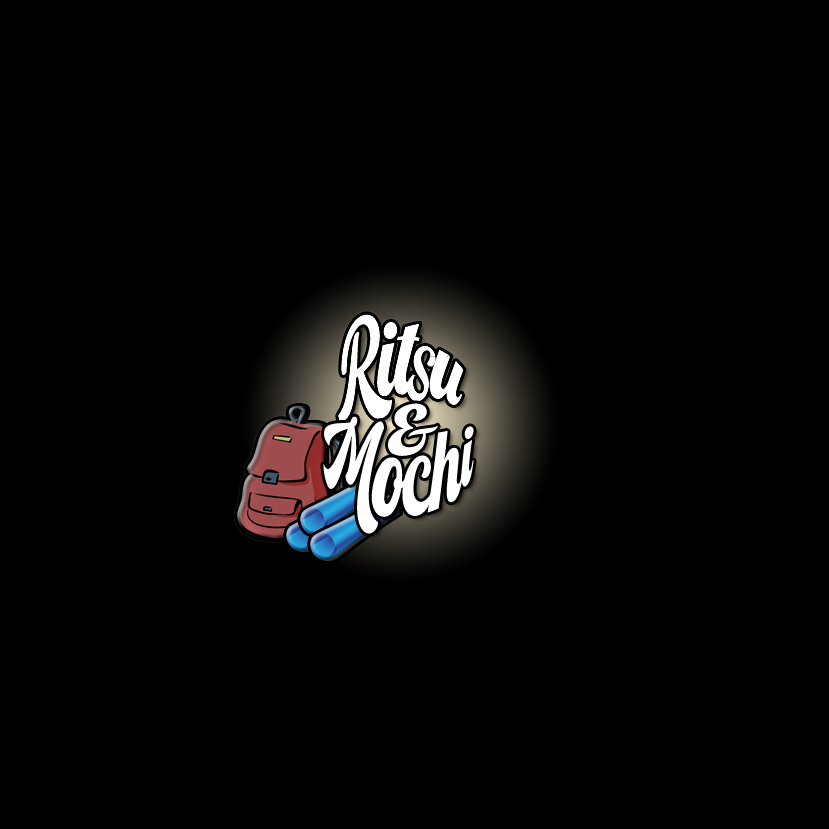
<style>
.page{position:relative;width:829px;height:829px;background:#000000}
.page>*{position:absolute;margin:0}
.t1{font:72px "Franky";color:#ffffff;scale:1.43 1}
.t2{font:72px "Franky";color:#ffffff}
</style>
<div class="page">
<p class="t1" style="left:388px;top:403px;width:50px;height:53px;rotate:-13deg">&amp;</p>
<p class="t2" style="left:323px;top:416px;width:151px;height:118px">Mochi</p>
</div>
